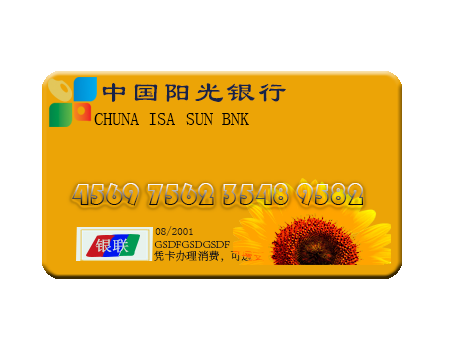
<style>
.page{position:relative;width:454px;height:340px;background:#ffffff}
.page>*{position:absolute;margin:0}
.t1{font:29.5px "LiSu";letter-spacing:0.075em;color:#182347}
.t2{font:18px "NSimSun";color:#000000}
.t3{font:18px "SimSun";color:#000000}
.t4{font:30.2px "STCaiyun";letter-spacing:0.005em}
.t5{font:11px "SimSun";color:#1f1d16}
.t6{font:14.9px "SimSun";color:#d7ebe2;scale:1.14 1}
.t7{font:11px "AdobeSongStd-Light";color:#1f1d16}
</style>
<div class="page">
<p class="t1" style="left:102px;top:83px;width:184px;height:19px">中国阳光银行</p>
<p class="t2" style="left:94px;top:113px;width:81px;height:12px">CHUNA ISA</p>
<p class="t3" style="left:186px;top:113px;width:63px;height:12px">SUN BNK</p>
<p class="t4" style="left:72px;top:183px;width:292px;height:23px">4569 7562 3548 9582</p>
<p class="t5" style="left:155px;top:226px;width:38px;height:10px">08/2001</p>
<p class="t6" style="left:95px;top:238px;width:34px;height:15px">银联</p>
<p class="t7" style="left:154px;top:241px;width:76px;height:7px">GSDFGSDGSDF</p>
<p class="t7" style="left:154px;top:250px;width:110px;height:12px">凭卡办理消费，可透支</p>
</div>
